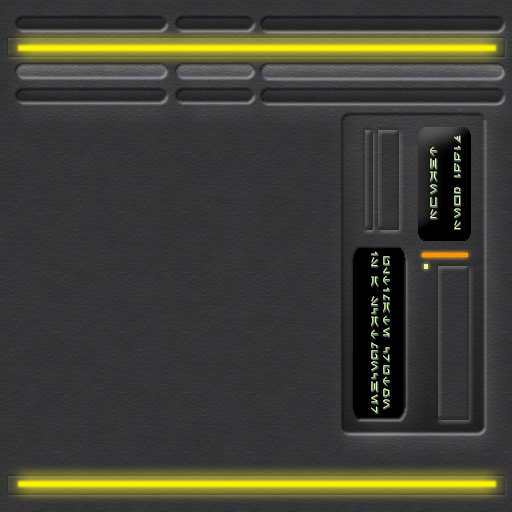
<style>
.page{position:relative;width:512px;height:512px}
.page>*{position:absolute;margin:0}
.t1{font:10px "Aurabesh";letter-spacing:0.2em;color:#cbffa9}
</style>
<div class="page">
<p class="t1" style="left:430px;top:135px;width:31px;height:95px;text-align:center;rotate:90deg">dizzi pwns<br><br>thanks</p>
<p class="t1" style="left:371px;top:251px;width:19px;height:163px;text-align:center;rotate:90deg">ultimate cruton<br>is a scatmuncher</p>
</div>
